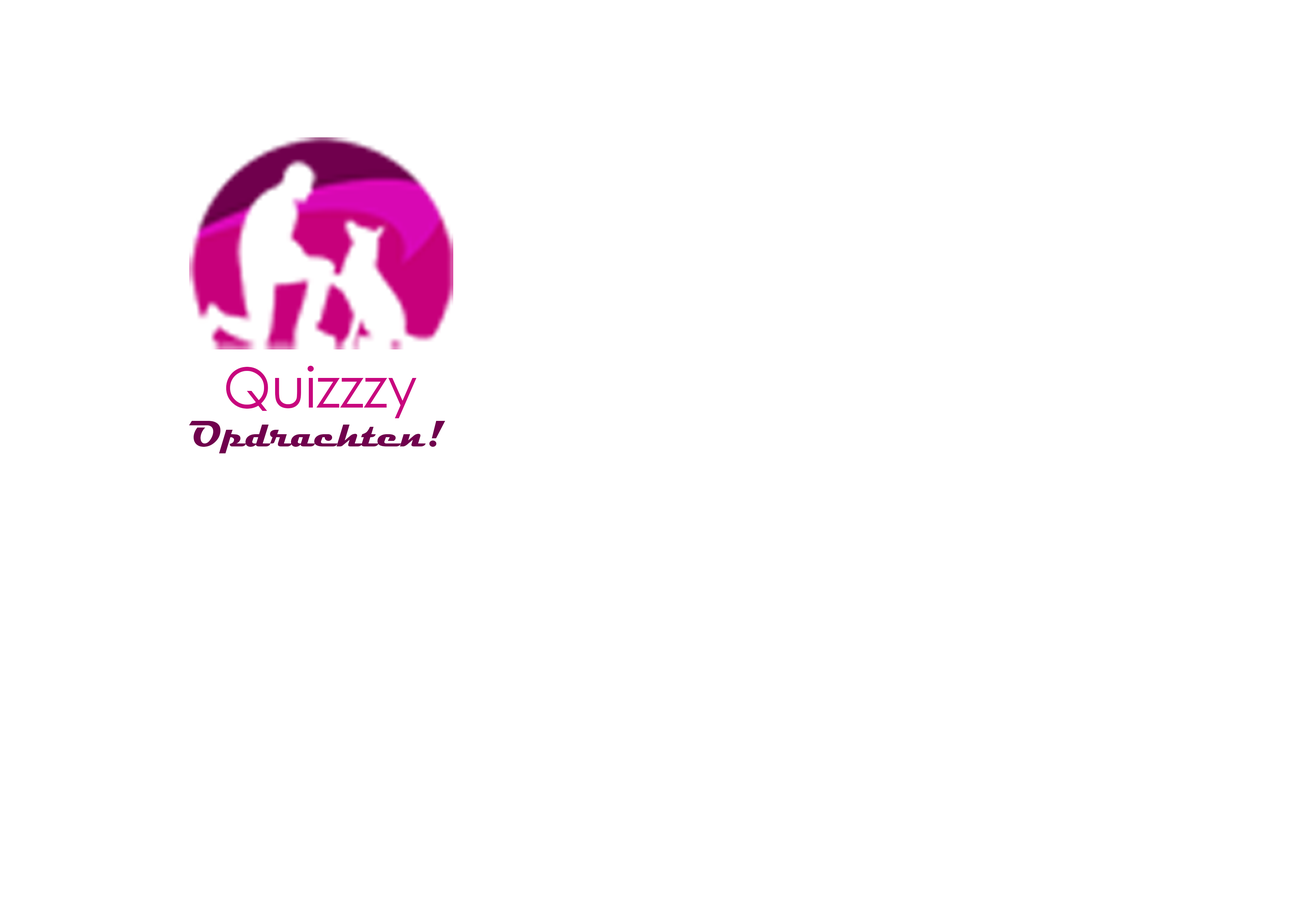
<style>
.page{position:relative;width:1299px;height:918px;background:#ffffff}
.page>*{position:absolute;margin:0}
.t1{font:55.5px "LevenimMT";color:#c8057e}
.t2{font:37px "Magneto-Bold";color:#70004d}
</style>
<div class="page">
<p class="t1" style="left:226px;top:366px;width:190px;height:52px">Quizzzy</p>
<p class="t2" style="left:189px;top:421px;width:256px;height:33px">Opdrachten!</p>
</div>
